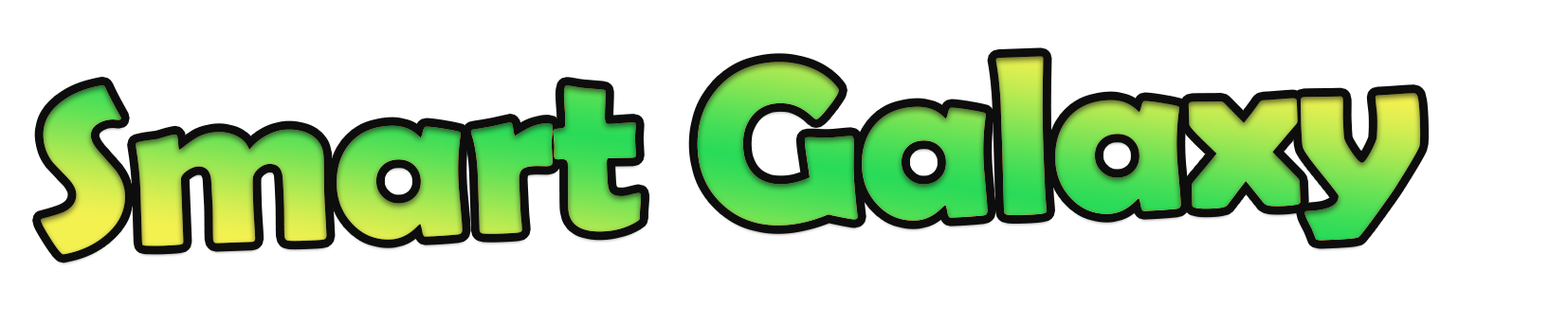
<style>
.page{position:relative;width:1568px;height:326px;background:#ffffff}
.page>*{position:absolute;margin:0}
.t1{font:228.9px "BerlinSansFBDemi-Bold";letter-spacing:-0.02em;scale:1.04 1}
</style>
<div class="page">
<p class="t1" style="left:41px;top:56px;width:1380px;height:199px;rotate:-2deg">Smart Galaxy</p>
</div>
